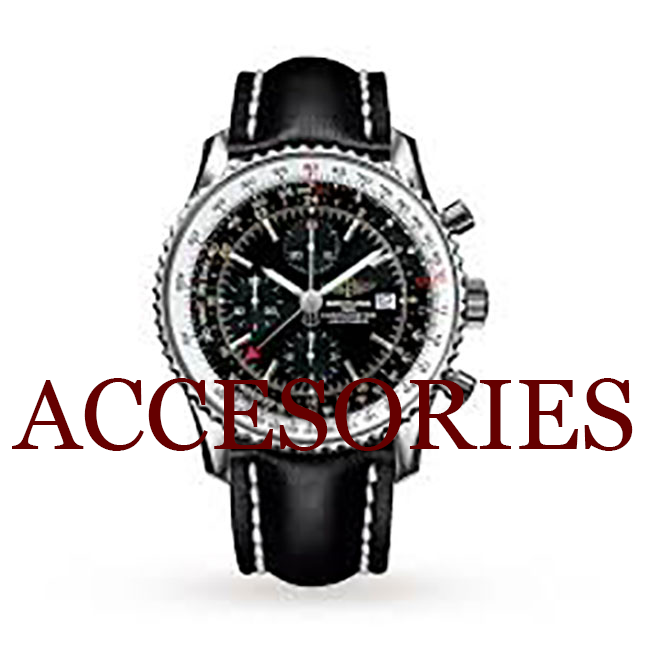
<style>
.page{position:relative;width:650px;height:650px;background:#ffffff}
.page>*{position:absolute;margin:0}
.t1{font:100px "Georgia";color:#650000}
</style>
<div class="page">
<p class="t1" style="left:12px;top:378px;width:621px;height:73px">ACCESORIES</p>
</div>
